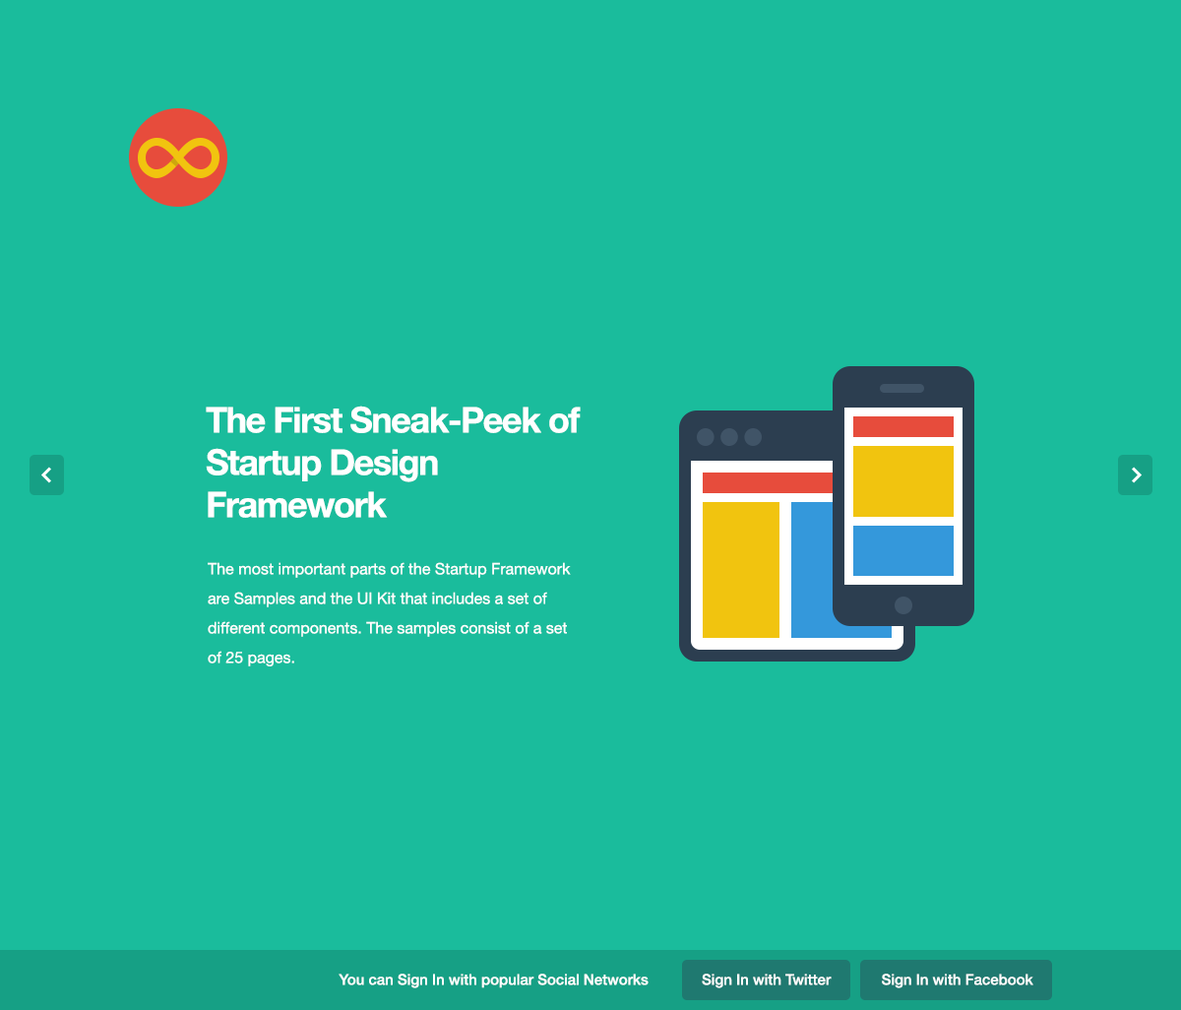
<style>
.page{position:relative;width:1181px;height:1010px;background:#1abc9c}
.page>*{position:absolute;margin:0}
.t1{font:35.4px/42.3px "HelveticaNeue-Bold";letter-spacing:-0.04em;color:#ffffff}
.t2{font:15.7px/29.5px "HelveticaNeue";color:#ffffff}
.t3{font:14.8px "HelveticaNeue-Medium";color:#ffffff}
</style>
<div class="page">
<p class="t1" style="left:206px;top:405px;width:375px;height:113px">The First Sneak-Peek of Startup Design Framework</p>
<p class="t2" style="left:208px;top:562px;width:363px;height:104px">The most important parts of the Startup Framework are Samples and the UI Kit that includes a set of different components. The samples consist of a set of 25 pages.</p>
<p class="t3" style="left:339px;top:973px;width:310px;height:15px">You can Sign In with popular Social Networks</p>
<p class="t3" style="left:702px;top:973px;width:130px;height:15px">Sign In with Twitter</p>
<p class="t3" style="left:882px;top:973px;width:151px;height:15px">Sign In with Facebook</p>
</div>
